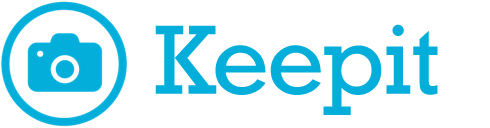
<style>
.page{position:relative;width:490px;height:128px;background:#ffffff}
.page>*{position:absolute;margin:0}
.t1{font:100px "Rockwell";letter-spacing:-0.02em;color:#04aeda}
</style>
<div class="page">
<p class="t1" style="left:155px;top:24px;width:283px;height:91px">Keepit</p>
</div>
